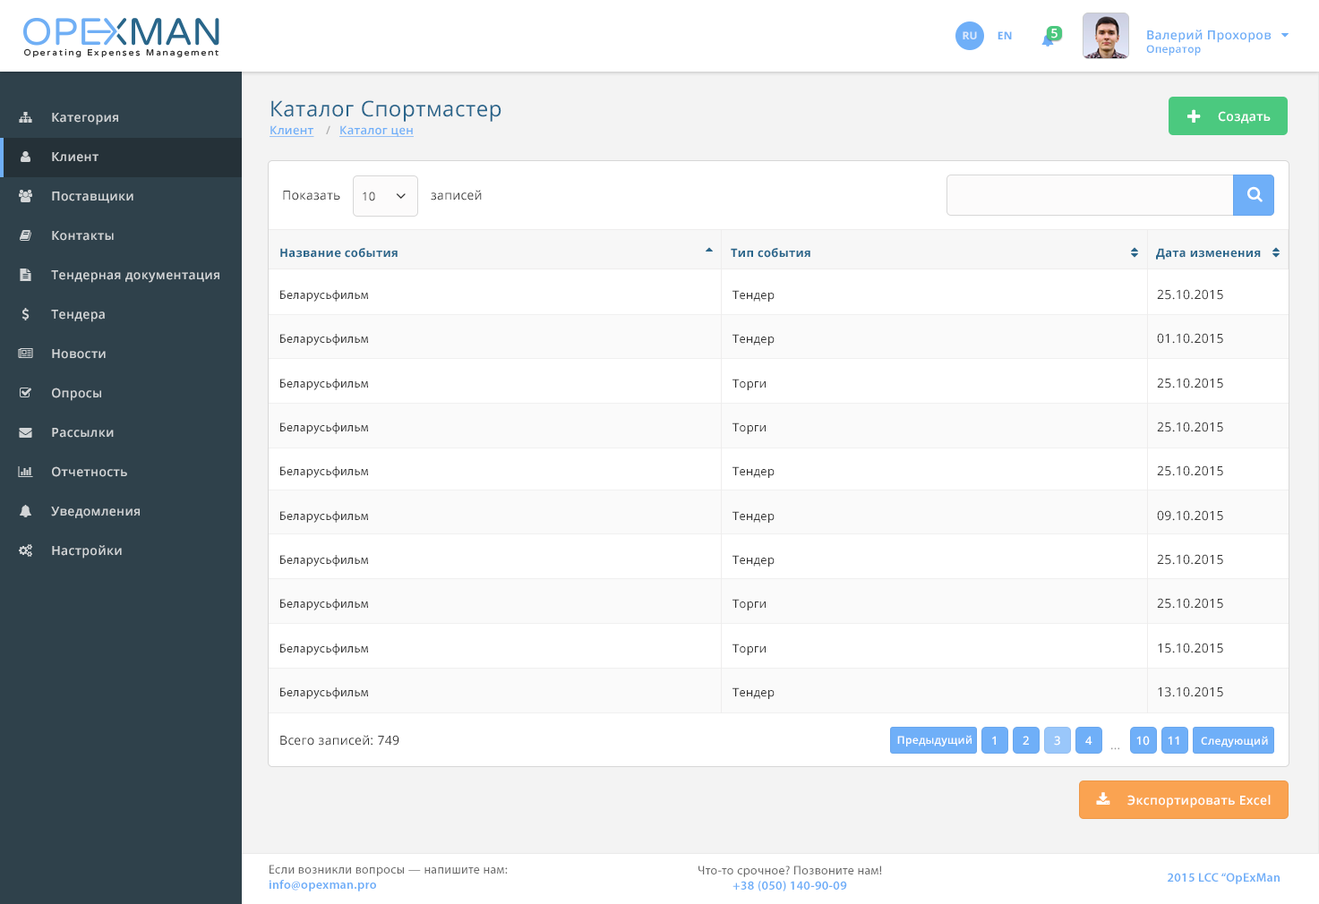
<style>
.page{position:relative;width:1319px;height:904px;background:#ffffff}
.page>*{position:absolute;margin:0}
.t1{font:12.5px "OpenSans-Semibold";letter-spacing:0.025em;color:#ffffff}
.t2{font:12.5px "OpenSans-Semibold";letter-spacing:0.025em;color:#6eaef7}
.t3{font:10.7px "OpenSans-Semibold";letter-spacing:0.025em;color:#6eaef7}
.t4{font:10.7px "OpenSans-Bold";letter-spacing:0.025em;color:#dbe9fd;text-transform:uppercase}
.t5{font:10.7px "OpenSans-Bold";letter-spacing:0.025em;color:#6faff8;text-transform:uppercase}
.t6{font:21.4px "OpenSans";letter-spacing:0.025em;color:#29658b}
.t7{font:12.5px "OpenSans-Semibold";letter-spacing:0.025em;color:#d2d5d7}
.t8{font:11.6px "OpenSans-Semibold";letter-spacing:0.025em;color:#6faff8;text-decoration:underline}
.t9{font:11.6px "OpenSans-Semibold";letter-spacing:0.025em;color:#afafaf}
.t10{font:12.5px "OpenSans";letter-spacing:0.025em;color:#333333}
.t11{font:11.6px "OpenSans";letter-spacing:0.025em;color:#333333}
.t12{font:11.6px "OpenSans-Bold";letter-spacing:0.025em;color:#29668b}
.t13{font:12.5px "MyriadPro-Regular";letter-spacing:0.025em;color:#333333}
.t14{font:10.7px "OpenSans-Semibold";letter-spacing:0.025em;color:#ffffff}
.t15{font:11.6px "OpenSans-Semibold";letter-spacing:0.025em;color:#ffffff}
.t16{font:11.6px "OpenSans";letter-spacing:0.025em;color:#999999}
.t17{font:12.5px "MyriadPro-Regular";letter-spacing:0.025em;color:#696969}
.t18{font:12.5px "MyriadPro-Semibold";letter-spacing:0.025em;color:#6eaef8}
</style>
<div class="page">
<p class="t1" style="left:1051px;top:29px;width:6px;height:9px">5</p>
<p class="t2" style="left:1146px;top:30px;width:125px;height:26px">Валерий Прохоров<br><span class="t3">Оператор</span></p>
<p class="t4" style="left:962px;top:31px;width:15px;height:8px">Ru</p>
<p class="t5" style="left:997px;top:31px;width:15px;height:8px">EN</p>
<p class="t6" style="left:271px;top:100px;width:230px;height:22px">Каталог Спортмастер</p>
<p class="t7" style="left:52px;top:113px;width:66px;height:12px">Категория</p>
<p class="t1" style="left:1218px;top:111px;width:52px;height:13px">Создать</p>
<p class="t8" style="left:269px;top:125px;width:45px;height:12px">Клиент</p>
<p class="t9" style="left:326px;top:125px;width:4px;height:9px">/</p>
<p class="t8" style="left:339px;top:125px;width:75px;height:12px">Каталог цен</p>
<p class="t7" style="left:52px;top:152px;width:46px;height:10px">Клиент</p>
<p class="t7" style="left:52px;top:192px;width:81px;height:11px">Поставщики</p>
<p class="t10" style="left:283px;top:191px;width:57px;height:10px">Показать</p>
<p class="t11" style="left:363px;top:192px;width:12px;height:9px">10</p>
<p class="t10" style="left:431px;top:190px;width:51px;height:11px">записей</p>
<p class="t7" style="left:52px;top:231px;width:62px;height:10px">Контакты</p>
<p class="t12" style="left:280px;top:248px;width:118px;height:10px">Название события</p>
<p class="t12" style="left:731px;top:248px;width:79px;height:10px">Тип события</p>
<p class="t12" style="left:1156px;top:248px;width:105px;height:12px">Дата изменения</p>
<p class="t7" style="left:51px;top:270px;width:168px;height:13px">Тендерная документация</p>
<p class="t13" style="left:280px;top:290px;width:88px;height:12px">Беларусьфильм</p>
<p class="t11" style="left:732px;top:290px;width:42px;height:12px">Тендер</p>
<p class="t10" style="left:1157px;top:289px;width:66px;height:11px">25.10.2015</p>
<p class="t7" style="left:51px;top:310px;width:54px;height:12px">Тендера</p>
<p class="t13" style="left:280px;top:334px;width:88px;height:12px">Беларусьфильм</p>
<p class="t11" style="left:732px;top:334px;width:42px;height:12px">Тендер</p>
<p class="t10" style="left:1157px;top:333px;width:66px;height:11px">01.10.2015</p>
<p class="t7" style="left:52px;top:349px;width:54px;height:10px">Новости</p>
<p class="t10" style="left:1157px;top:378px;width:66px;height:11px">25.10.2015</p>
<p class="t7" style="left:52px;top:388px;width:49px;height:13px">Опросы</p>
<p class="t13" style="left:280px;top:379px;width:88px;height:11px">Беларусьфильм</p>
<p class="t11" style="left:732px;top:379px;width:33px;height:11px">Торги</p>
<p class="t13" style="left:280px;top:423px;width:88px;height:11px">Беларусьфильм</p>
<p class="t11" style="left:732px;top:423px;width:33px;height:11px">Торги</p>
<p class="t10" style="left:1157px;top:422px;width:66px;height:10px">25.10.2015</p>
<p class="t7" style="left:52px;top:428px;width:62px;height:10px">Рассылки</p>
<p class="t7" style="left:52px;top:466px;width:75px;height:11px">Отчетность</p>
<p class="t13" style="left:280px;top:466px;width:88px;height:12px">Беларусьфильм</p>
<p class="t11" style="left:732px;top:466px;width:42px;height:12px">Тендер</p>
<p class="t10" style="left:1157px;top:466px;width:66px;height:10px">25.10.2015</p>
<p class="t7" style="left:51px;top:507px;width:89px;height:11px">Уведомления</p>
<p class="t13" style="left:280px;top:511px;width:88px;height:12px">Беларусьфильм</p>
<p class="t11" style="left:732px;top:511px;width:42px;height:12px">Тендер</p>
<p class="t10" style="left:1157px;top:510px;width:66px;height:11px">09.10.2015</p>
<p class="t7" style="left:52px;top:545px;width:70px;height:14px">Настройки</p>
<p class="t13" style="left:280px;top:555px;width:88px;height:12px">Беларусьфильм</p>
<p class="t11" style="left:732px;top:555px;width:42px;height:12px">Тендер</p>
<p class="t10" style="left:1157px;top:554px;width:66px;height:11px">25.10.2015</p>
<p class="t13" style="left:280px;top:599px;width:88px;height:12px">Беларусьфильм</p>
<p class="t11" style="left:732px;top:599px;width:33px;height:12px">Торги</p>
<p class="t10" style="left:1157px;top:598px;width:66px;height:11px">25.10.2015</p>
<p class="t13" style="left:280px;top:644px;width:88px;height:11px">Беларусьфильм</p>
<p class="t11" style="left:732px;top:644px;width:33px;height:11px">Торги</p>
<p class="t10" style="left:1158px;top:643px;width:65px;height:11px">15.10.2015</p>
<p class="t13" style="left:280px;top:688px;width:88px;height:11px">Беларусьфильм</p>
<p class="t11" style="left:732px;top:688px;width:42px;height:11px">Тендер</p>
<p class="t10" style="left:1158px;top:687px;width:65px;height:10px">13.10.2015</p>
<p class="t10" style="left:280px;top:735px;width:119px;height:11px">Всего записей: 749</p>
<p class="t14" style="left:897px;top:735px;width:74px;height:12px">Предыдущий</p>
<p class="t15" style="left:992px;top:736px;width:4px;height:9px">1</p>
<p class="t15" style="left:1022px;top:736px;width:7px;height:9px">2</p>
<p class="t15" style="left:1054px;top:736px;width:6px;height:10px">3</p>
<p class="t15" style="left:1085px;top:736px;width:7px;height:9px">4</p>
<p class="t15" style="left:1136px;top:736px;width:14px;height:10px">10</p>
<p class="t15" style="left:1167px;top:736px;width:12px;height:9px">11</p>
<p class="t14" style="left:1201px;top:736px;width:67px;height:12px">Следующий</p>
<p class="t16" style="left:1111px;top:748px;width:8px;height:2px">...</p>
<p class="t1" style="left:1127px;top:795px;width:143px;height:13px">Экспортировать Excel</p>
<p class="t17" style="left:269px;top:865px;width:239px;height:27px">Если возникли вопросы — напишите нам:<br><span class="t18">info@opexman.pro</span></p>
<p class="t17" style="left:698px;top:866px;width:184px;height:26px;text-align:center">Что-то срочное? Позвоните нам!<br><span class="t18">+38 (050) 140-90-09</span></p>
<p class="t18" style="left:1167px;top:873px;width:112px;height:12px">2015 LCC “OpExMan</p>
</div>
